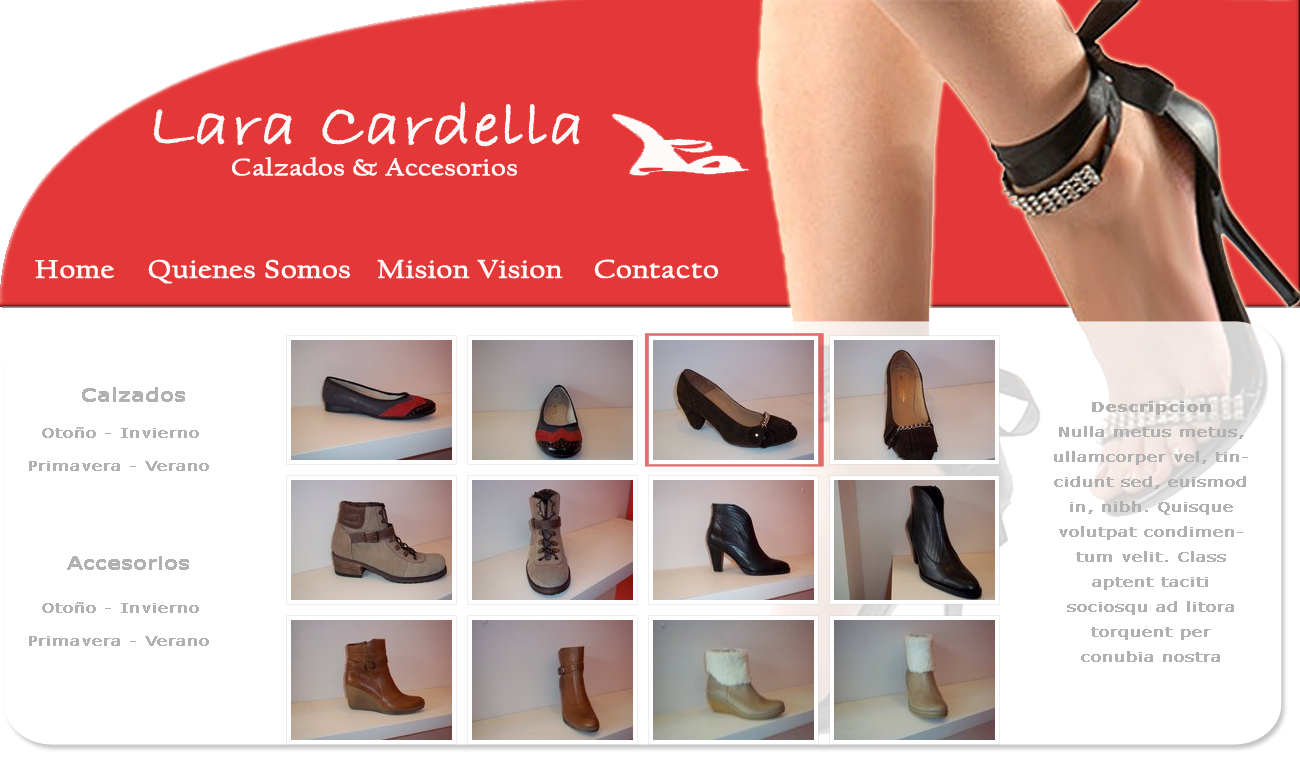
<style>
.page{position:relative;width:1300px;height:768px;background:#ffffff}
.page>*{position:absolute;margin:0}
.t1{font:60px "BradleyHandITC";color:#fdf8f8;font-weight:bold;scale:1.2 1}
.t2{font:24px "CalifornianFB-Reg";color:#fdf8f8;font-weight:bold;scale:1.2 1}
.t3{font:26px "CalifornianFB-Reg";color:#fdf8f8;font-weight:bold;scale:1.2 1}
.t4{font:18px "Verdana";color:#b2b1b1;font-weight:bold;scale:1.2 1}
.t5{font:14px/25px "Verdana";color:#b2b1b1;font-weight:bold;scale:1.2 1}
.t6{font:14px/25px "Verdana-Bold";color:#b2b1b1;font-weight:bold;scale:1.2 1}
.t7{font:14px "Verdana";color:#b2b1b1;font-weight:bold;scale:1.2 1}
</style>
<div class="page">
<p class="t1" style="left:153px;top:102px;width:427px;height:45px">Lara Cardella</p>
<p class="t2" style="left:232px;top:156px;width:286px;height:20px">Calzados &amp; Accesorios</p>
<p class="t3" style="left:35px;top:260px;width:79px;height:19px">Home</p>
<p class="t3" style="left:148px;top:259px;width:202px;height:25px">Quienes Somos</p>
<p class="t3" style="left:377px;top:259px;width:186px;height:20px">Mision Vision</p>
<p class="t3" style="left:594px;top:259px;width:124px;height:20px">Contacto</p>
<p class="t4" style="left:82px;top:387px;width:103px;height:15px">Calzados</p>
<p class="t5" style="left:1054px;top:401px;width:194px;height:261px;text-align:center"><span class="t6">Descripcion<br></span>Nulla metus metus, ullamcorper vel, tincidunt sed, euismod in, nibh. Quisque volutpat condimentum velit. Class aptent taciti sociosqu ad litora torquent per conubia nostra</p>
<p class="t7" style="left:42px;top:427px;width:157px;height:11px">Otoño - Invierno</p>
<p class="t7" style="left:29px;top:461px;width:180px;height:10px">Primavera - Verano</p>
<p class="t4" style="left:67px;top:556px;width:122px;height:14px">Accesorios</p>
<p class="t7" style="left:42px;top:602px;width:157px;height:11px">Otoño - Invierno</p>
<p class="t7" style="left:29px;top:636px;width:180px;height:10px">Primavera - Verano</p>
</div>
